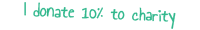
<style>
.page{position:relative;width:200px;height:30px;background:#ffffff}
.page>*{position:absolute;margin:0}
.t1{font:18px "AnnieUseYourTelescope";color:#32b88d;font-weight:bold}
</style>
<div class="page">
<p class="t1" style="left:24px;top:2px;width:152px;height:27px;rotate:2deg">I donate 10% to charity</p>
</div>
